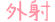
<style>
.page{position:relative;width:55px;height:22px;background:#ffffff}
.page>*{position:absolute;margin:0}
.t1{font:26px "¢è?";color:#ff93a5}
</style>
<div class="page">
<p class="t1" style="left:6px;top:0px;width:45px;height:21px">外射</p>
</div>
